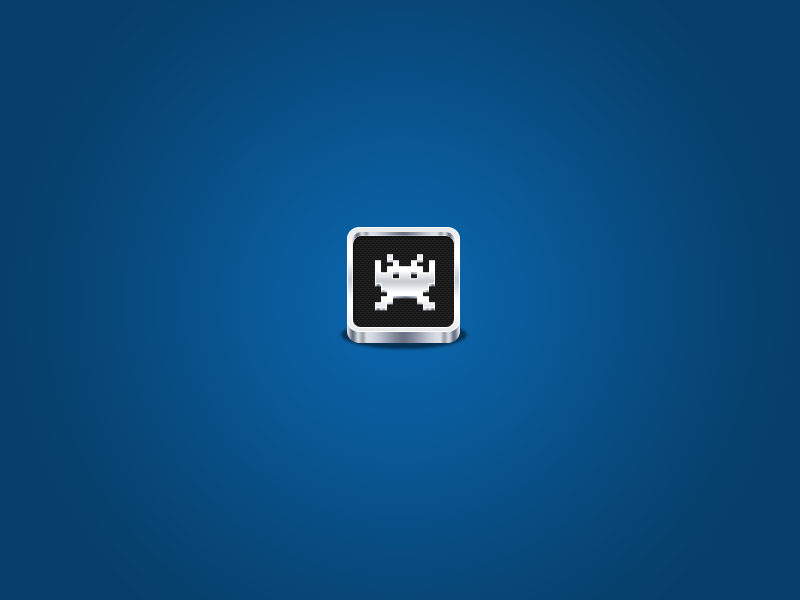
<style>
.page{position:relative;width:800px;height:600px}
.page>*{position:absolute;margin:0}
.t1{font:85.7px "LigatureSymbols";color:#ebedef}
.t2{font:85.7px "LigatureSymbols";color:#f4f5f5}
</style>
<div class="page">
<p class="t1" style="left:375px;top:256px;width:60px;height:55px">game</p>
<p class="t2" style="left:375px;top:254px;width:60px;height:55px">game</p>
</div>
